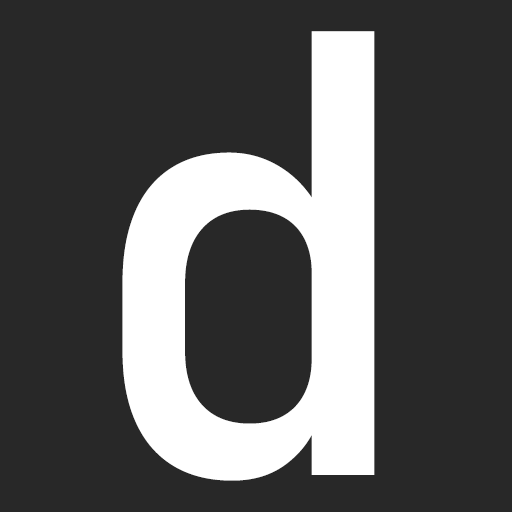
<style>
.page{position:relative;width:512px;height:512px;background:#282828}
.page>*{position:absolute;margin:0}
.t1{font:625px "Bahnschrift";color:#ffffff}
</style>
<div class="page">
<p class="t1" style="left:122px;top:31px;width:253px;height:450px">d</p>
</div>
